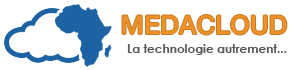
<style>
.page{position:relative;width:300px;height:70px;background:#ffffff}
.page>*{position:absolute;margin:0}
.t1{font:26px "HelveticaNeueMedium";color:#ee9126}
.t2{font:12px "CenturyGothic-Bold";color:#5a5a5a}
</style>
<div class="page">
<p class="t1" style="left:122px;top:15px;width:165px;height:20px">MEDACLOUD</p>
<p class="t2" style="left:127px;top:44px;width:160px;height:11px">La technologie autrement...</p>
</div>
